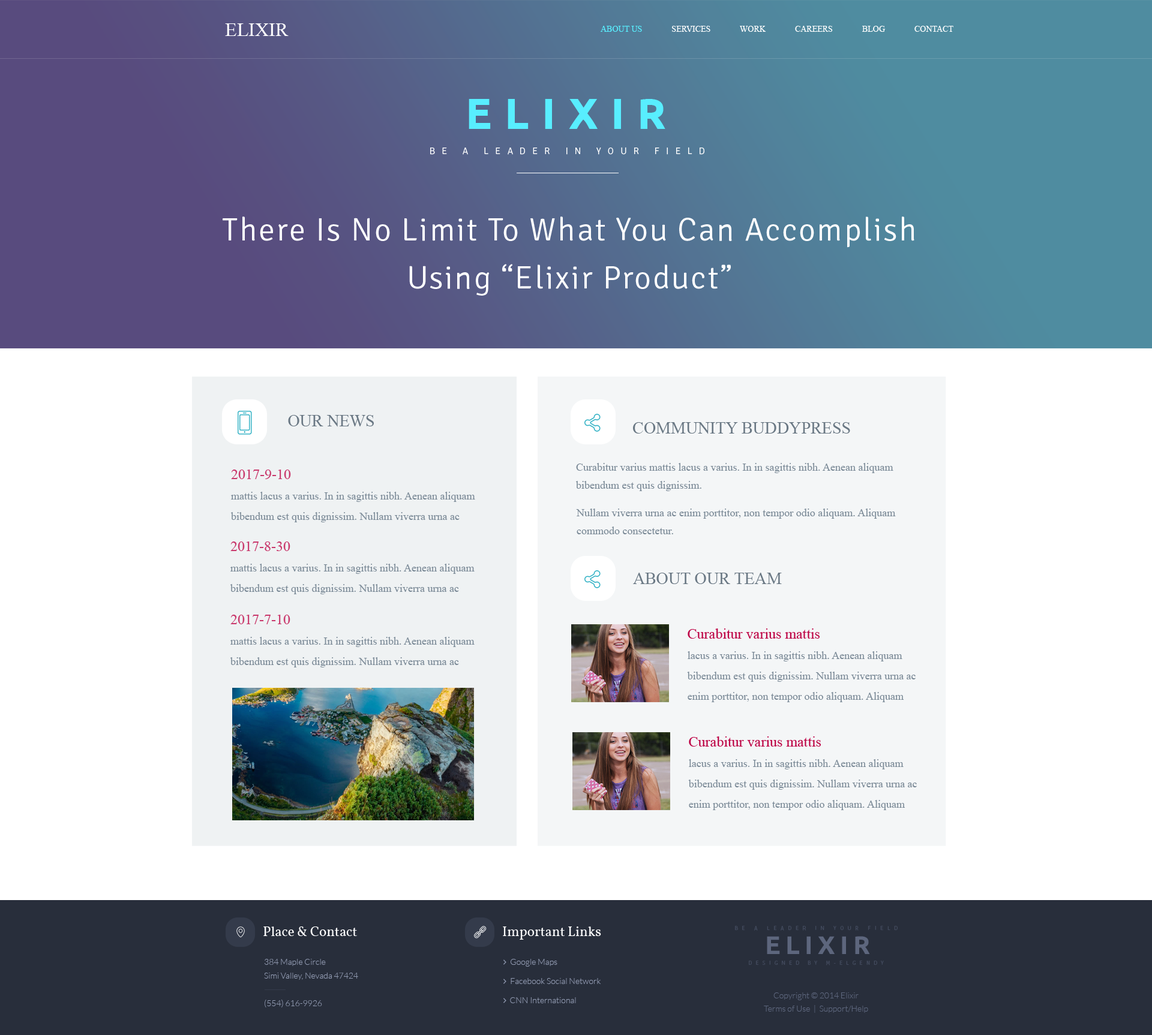
<style>
.page{position:relative;width:1152px;height:1035px;background:#ffffff}
.page>*{position:absolute;margin:0}
.t1{font:19.2px "TimesNewRomanPSMT";color:#ffffff;text-transform:uppercase}
.t2{font:8.4px "TimesNewRomanPSMT";color:#ffffff;text-transform:uppercase}
.t3{font:8.4px "TimesNewRomanPSMT";color:#58eeff;text-transform:uppercase}
.t4{font:28.8px "UIFont-Stroked";color:#33b2c5}
.t5{font:16.8px "TimesNewRomanPSMT";color:#6a7884}
.t6{font:16.8px "TimesNewRomanPSMT";color:#6a7884;text-transform:uppercase}
.t7{font:10.8px/20.4px "TimesNewRomanPSMT";color:#7b8a97}
.t8{font:14.4px/20.4px "TimesNewRomanPSMT";color:#c9396c}
.t9{font:10.8px/18px "TimesNewRomanPSMT";color:#7b8a97}
.t10{font:14.4px/20.4px "TimesNewRomanPSMT";color:#be0647;font-weight:bold}
.t11{font:14.4px "UIFont-Stroked"}
.t12{font:13.8px "Vollkorn-Regular";color:#ffffff}
.t13{font:18px "UIFont-Stroked";color:#ffffff}
.t14{font:5.4px "Signika-Light";letter-spacing:0.75em;color:#424a5d;text-transform:uppercase}
.t15{font:25.4px "Ubuntu-Bold";letter-spacing:0.2em;color:#5d667d;text-transform:uppercase}
.t16{font:8.4px/13.8px "Lato-Light";color:#9099b0}
.t17{font:5.4px "Signika-Light";letter-spacing:0.69em;color:#424a5d;text-transform:uppercase}
.t18{font:8.4px/13.2px "Lato-Light";color:#5d667d}
</style>
<div class="page">
<p class="t1" style="left:225px;top:23px;width:64px;height:13px">Elixir</p>
<p class="t2" style="left:600px;top:26px;width:353px;height:6px"><span class="t3">About Us</span>              Services              Work              Careers              Blog              Contact</p>
<p class="t4" style="left:238px;top:411px;width:14px;height:24px">smartphone</p>
<p class="t4" style="left:584px;top:414px;width:16px;height:18px">share</p>
<p class="t5" style="left:288px;top:415px;width:86px;height:12px">OUR NEWS</p>
<p class="t6" style="left:633px;top:422px;width:217px;height:12px">Community BuddyPress</p>
<p class="t7" style="left:231px;top:470px;width:244px;height:52px"><span class="t8">2017-9-10<br></span>mattis lacus a varius. In in sagittis nibh. Aenean aliquam bibendum est quis dignissim. Nullam viverra urna ac enim porttitor, non tempor odio aliquam. Aliquam commodo consectetur.</p>
<p class="t9" style="left:576px;top:463px;width:317px;height:28px">Curabitur varius mattis lacus a varius. In in sagittis nibh. Aenean aliquam bibendum est quis dignissim.</p>
<p class="t9" style="left:576px;top:509px;width:320px;height:25px">Nullam viverra urna ac enim porttitor, non tempor odio aliquam. Aliquam commodo consectetur.</p>
<p class="t7" style="left:230px;top:542px;width:244px;height:52px"><span class="t8">2017-8-30<br></span>mattis lacus a varius. In in sagittis nibh. Aenean aliquam bibendum est quis dignissim. Nullam viverra urna ac enim porttitor, non tempor odio aliquam. Aliquam commodo consectetur.</p>
<p class="t4" style="left:584px;top:570px;width:16px;height:18px">share</p>
<p class="t5" style="left:633px;top:573px;width:149px;height:11px">ABOUT OUR TEAM</p>
<p class="t7" style="left:230px;top:615px;width:244px;height:53px"><span class="t8">2017-7-10<br></span>mattis lacus a varius. In in sagittis nibh. Aenean aliquam bibendum est quis dignissim. Nullam viverra urna ac enim porttitor, non tempor odio aliquam. Aliquam commodo consectetur.</p>
<p class="t7" style="left:687px;top:629px;width:228px;height:73px"><span class="t10">Curabitur varius mattis <br></span>lacus a varius. In in sagittis nibh. Aenean aliquam bibendum est quis dignissim. Nullam viverra urna ac enim porttitor, non tempor odio aliquam. Aliquam commodo consectetur.</p>
<p class="t7" style="left:688px;top:737px;width:229px;height:73px"><span class="t10">Curabitur varius mattis <br></span>lacus a varius. In in sagittis nibh. Aenean aliquam bibendum est quis dignissim. Nullam viverra urna ac enim porttitor, non tempor odio aliquam. Aliquam commodo consectetur.</p>
<p class="t11" style="left:236px;top:927px;width:9px;height:11px">location</p>
<p class="t12" style="left:263px;top:927px;width:94px;height:9px">Place &amp; Contact</p>
<p class="t13" style="left:474px;top:926px;width:12px;height:13px">link</p>
<p class="t12" style="left:503px;top:927px;width:98px;height:13px">Important Links</p>
<p class="t14" style="left:735px;top:926px;width:162px;height:5px">Be a leader in your field</p>
<p class="t15" style="left:767px;top:936px;width:103px;height:18px">Elixir</p>
<p class="t16" style="left:264px;top:959px;width:94px;height:49px">384 Maple Circle<br>Simi Valley, Nevada 47424<br><br>(554) 616-9926</p>
<p class="t17" style="left:749px;top:961px;width:135px;height:5px">Designed By M-Elgendy</p>
<p class="t18" style="left:764px;top:993px;width:104px;height:20px;text-align:center">Copyright © 2014 Elixir<br>Terms of Use  |  Support/Help</p>
</div>
